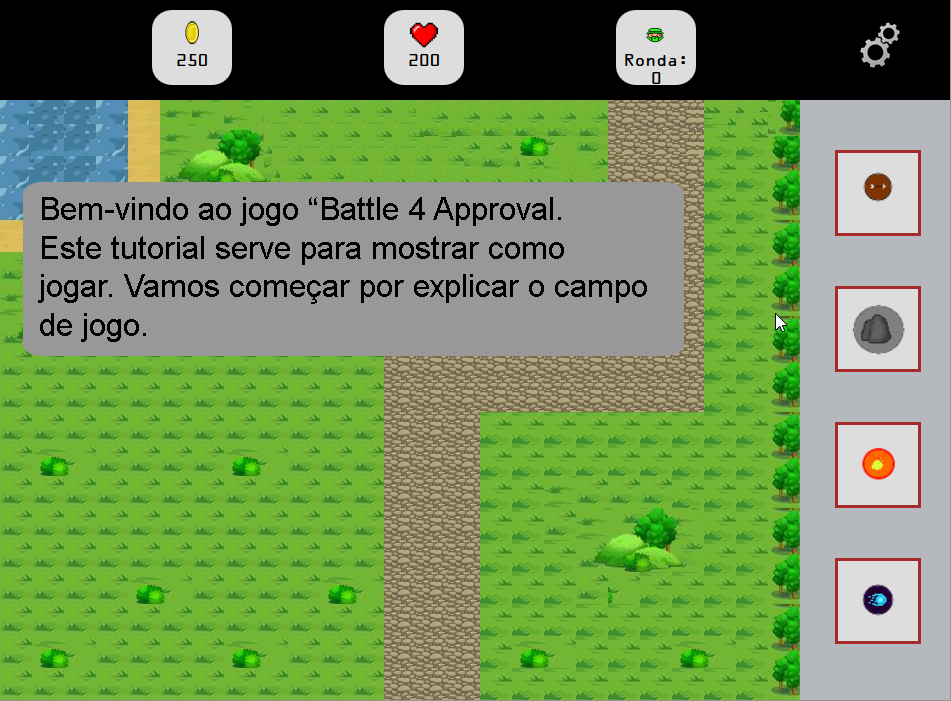
<style>
.page{position:relative;width:951px;height:701px}
.page>*{position:absolute;margin:0}
.t1{font:32px "ArialMT";color:#000000}
.t2{font:32px "SFSlapstickComic";color:#000000}
</style>
<div class="page">
<p class="t1" style="left:38px;top:197px;width:609px;height:145px"><span class="t2"><br></span>Bem-vindo ao jogo “Battle 4 Approval.<br>Este tutorial serve para mostrar como<br>jogar. Vamos começar por explicar o campo <br>de jogo.</p>
</div>
